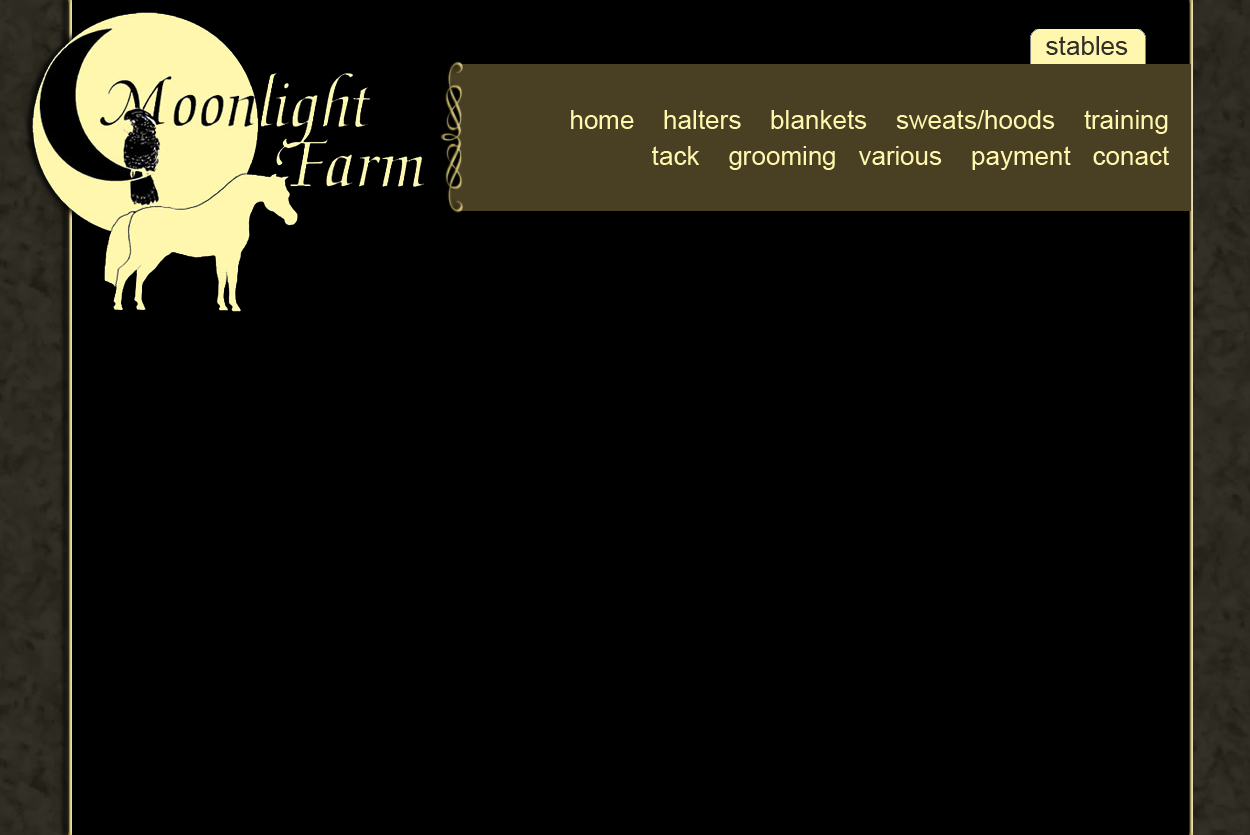
<style>
.page{position:relative;width:1250px;height:835px;background:#000000}
.page>*{position:absolute;margin:0}
.t1{font:26px "ArialMT";color:#322f27}
.t2{font:26px/36px "ArialMT";color:#fff7ae}
</style>
<div class="page">
<p class="t1" style="left:1046px;top:36px;width:82px;height:19px">stables</p>
<p class="t2" style="left:571px;top:110px;width:598px;height:60px;text-align:right">home    halters    blankets    sweats/hoods    training<br>tack    grooming   various    payment   conact</p>
</div>
